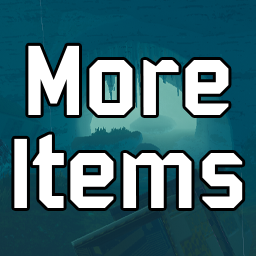
<style>
.page{position:relative;width:256px;height:256px;background:#ffffff}
.page>*{position:absolute;margin:0}
.t1{font:107.9px/92.4px "Bombardier";color:#ffffff}
</style>
<div class="page">
<p class="t1" style="left:14px;top:45px;width:229px;height:163px;text-align:center">More<br>Items</p>
</div>
